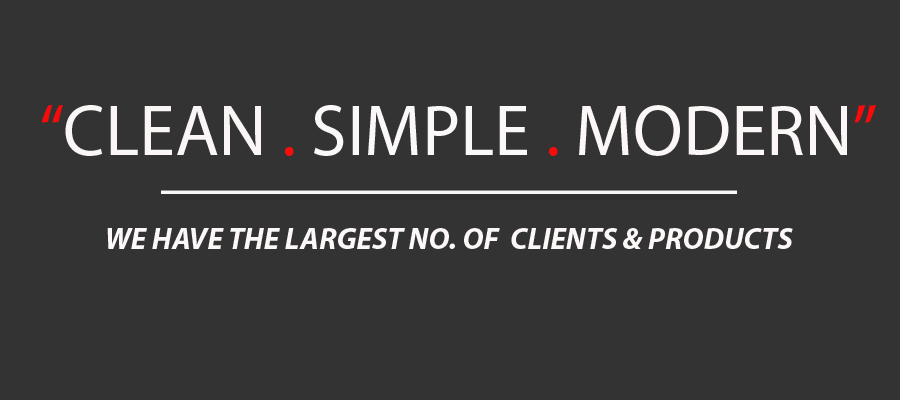
<style>
.page{position:relative;width:900px;height:400px;background:#333333}
.page>*{position:absolute;margin:0}
.t1{font:72px "MyriadPro-Regular";color:#faf8f8}
.t2{font:72px "MyriadPro-Regular";color:#f60b0b}
.t3{font:72px "MyriadPro-Regular";color:#faf6f6}
.t4{font:72px "MyriadPro-Regular";color:#f90c0c}
.t5{font:72px "MyriadPro-Regular";color:#f80b0b}
.t6{font:72px "MyriadPro-Regular";color:#fcf7f7}
.t7{font:72px "MyriadPro-Regular";color:#fa0a0a}
.t8{font:72px "MyriadPro-Regular";color:#fbf8f8}
.t9{font:30px "MyriadPro-BoldIt";color:#fcf8f8}
</style>
<div class="page">
<p class="t1" style="left:41px;top:105px;width:835px;height:51px"><span class="t2">“</span><span class="t3">CLEAN </span><span class="t4">. </span>SIMPLE <span class="t5">. </span><span class="t6">MODERN</span><span class="t7">”</span></p>
<p class="t8" style="left:161px;top:190px;width:576px;height:4px">________________</p>
<p class="t9" style="left:107px;top:228px;width:686px;height:21px">WE HAVE THE LARGEST NO. OF  CLIENTS &amp; PRODUCTS</p>
</div>
